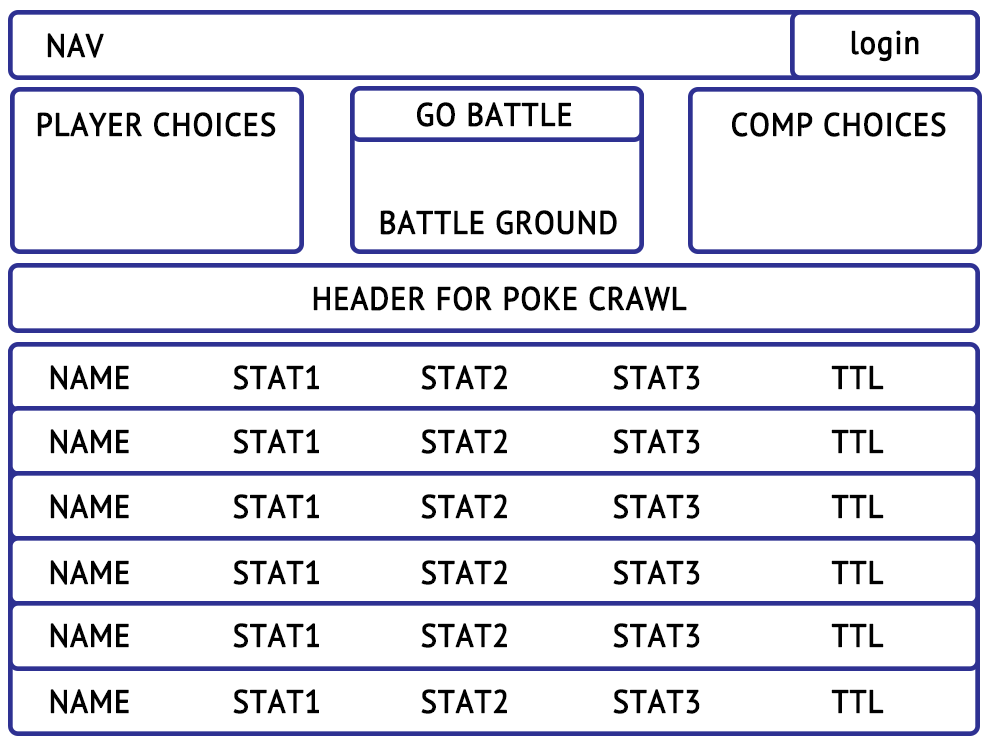
<style>
.page{position:relative;width:1000px;height:750px;background:#ffffff}
.page>*{position:absolute;margin:0}
.t1{font:32.3px "PTSans-Regular";letter-spacing:0.01em;color:#010101;font-weight:bold;scale:0.94 1}
</style>
<div class="page">
<p class="t1" style="left:851px;top:30px;width:68px;height:32px">login</p>
<p class="t1" style="left:47px;top:33px;width:57px;height:25px">NAV</p>
<p class="t1" style="left:417px;top:102px;width:155px;height:25px">GO BATTLE</p>
<p class="t1" style="left:37px;top:112px;width:239px;height:25px">PLAYER CHOICES</p>
<p class="t1" style="left:732px;top:112px;width:214px;height:25px">COMP CHOICES</p>
<p class="t1" style="left:380px;top:210px;width:237px;height:25px">BATTLE GROUND</p>
<p class="t1" style="left:313px;top:286px;width:374px;height:25px">HEADER FOR POKE CRAWL</p>
<p class="t1" style="left:50px;top:365px;width:79px;height:25px">NAME</p>
<p class="t1" style="left:233px;top:365px;width:86px;height:25px">STAT1</p>
<p class="t1" style="left:421px;top:365px;width:86px;height:25px">STAT2</p>
<p class="t1" style="left:613px;top:365px;width:87px;height:25px">STAT3</p>
<p class="t1" style="left:831px;top:365px;width:53px;height:25px">TTL</p>
<p class="t1" style="left:50px;top:429px;width:79px;height:25px">NAME</p>
<p class="t1" style="left:233px;top:429px;width:86px;height:25px">STAT1</p>
<p class="t1" style="left:421px;top:429px;width:86px;height:25px">STAT2</p>
<p class="t1" style="left:613px;top:429px;width:87px;height:25px">STAT3</p>
<p class="t1" style="left:831px;top:429px;width:53px;height:25px">TTL</p>
<p class="t1" style="left:50px;top:494px;width:79px;height:25px">NAME</p>
<p class="t1" style="left:233px;top:494px;width:86px;height:25px">STAT1</p>
<p class="t1" style="left:421px;top:494px;width:86px;height:25px">STAT2</p>
<p class="t1" style="left:613px;top:494px;width:87px;height:25px">STAT3</p>
<p class="t1" style="left:831px;top:494px;width:53px;height:25px">TTL</p>
<p class="t1" style="left:50px;top:560px;width:79px;height:25px">NAME</p>
<p class="t1" style="left:233px;top:560px;width:86px;height:25px">STAT1</p>
<p class="t1" style="left:421px;top:560px;width:86px;height:25px">STAT2</p>
<p class="t1" style="left:613px;top:560px;width:87px;height:25px">STAT3</p>
<p class="t1" style="left:831px;top:560px;width:53px;height:25px">TTL</p>
<p class="t1" style="left:50px;top:623px;width:79px;height:25px">NAME</p>
<p class="t1" style="left:233px;top:623px;width:86px;height:25px">STAT1</p>
<p class="t1" style="left:421px;top:623px;width:86px;height:25px">STAT2</p>
<p class="t1" style="left:613px;top:623px;width:87px;height:25px">STAT3</p>
<p class="t1" style="left:831px;top:623px;width:53px;height:25px">TTL</p>
<p class="t1" style="left:50px;top:689px;width:79px;height:25px">NAME</p>
<p class="t1" style="left:233px;top:689px;width:86px;height:25px">STAT1</p>
<p class="t1" style="left:421px;top:689px;width:86px;height:25px">STAT2</p>
<p class="t1" style="left:613px;top:689px;width:87px;height:25px">STAT3</p>
<p class="t1" style="left:831px;top:689px;width:53px;height:25px">TTL</p>
</div>
